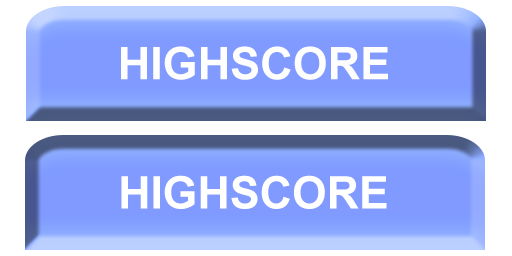
<style>
.page{position:relative;width:512px;height:256px;background:#ffffff}
.page>*{position:absolute;margin:0}
.t1{font:45px "Arial-BoldMT";color:#fffefe}
.t2{font:45px "Arial-BoldMT";color:#ffffff}
</style>
<div class="page">
<p class="t1" style="left:121px;top:46px;width:267px;height:34px">HIGHSCORE</p>
<p class="t2" style="left:121px;top:175px;width:266px;height:34px">HIGHSCORE</p>
</div>
